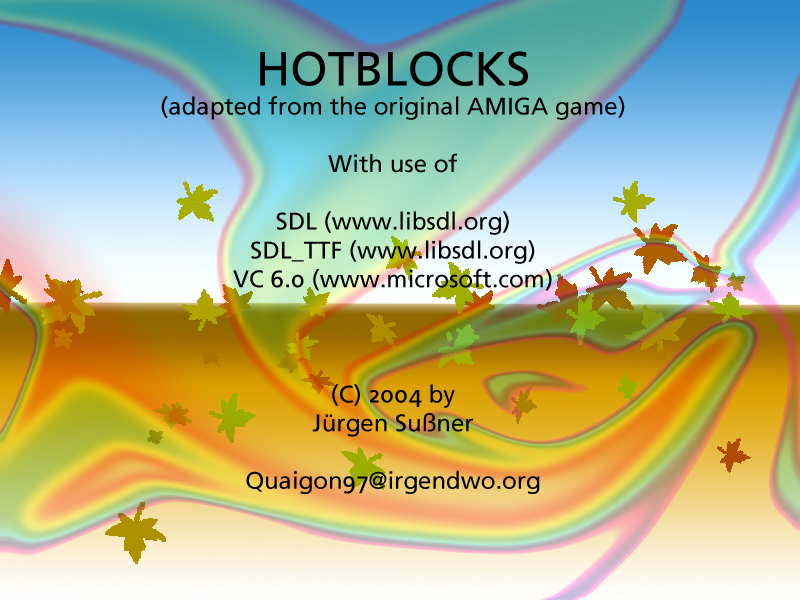
<style>
.page{position:relative;width:800px;height:600px}
.page>*{position:absolute;margin:0}
.t1{font:24px "FrutigerLinotype-Roman";color:#000000}
.t2{font:48px "FrutigerLinotype-Roman";color:#000000}
</style>
<div class="page">
<p class="t1" style="left:161px;top:51px;width:464px;height:443px;text-align:center"><span class="t2">HOTBLOCKS<br></span>(adapted from the original AMIGA game)<br><br>With use of <br><br>SDL (www.libsdl.org)<br>SDL_TTF (www.libsdl.org)<br>VC 6.0 (www.microsoft.com)<br><br><br><br>(C) 2004 by<br>Jürgen Sußner<br><br>Quaigon97@irgendwo.org</p>
</div>
